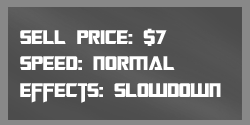
<style>
.page{position:relative;width:250px;height:125px}
.page>*{position:absolute;margin:0}
.t1{font:22px "TransformersMovie";color:#ffffff}
.t2{font:22px "TransformersMovie";letter-spacing:0.02em;color:#ffffff}
</style>
<div class="page">
<p class="t1" style="left:20px;top:28px;width:201px;height:75px">sell p<span class="t2">ri</span>ce: $7<br>spee<span class="t2">d</span>: <span class="t2">normal<br></span>effects: slowdown</p>
</div>
